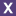
<style>
.page{position:relative;width:16px;height:16px;background:#563d7c}
.page>*{position:absolute;margin:0}
.t1{font:14.7px "CenturyGothic-Bold";color:#ffffff}
</style>
<div class="page">
<p class="t1" style="left:3px;top:2px;width:10px;height:12px">X</p>
</div>
